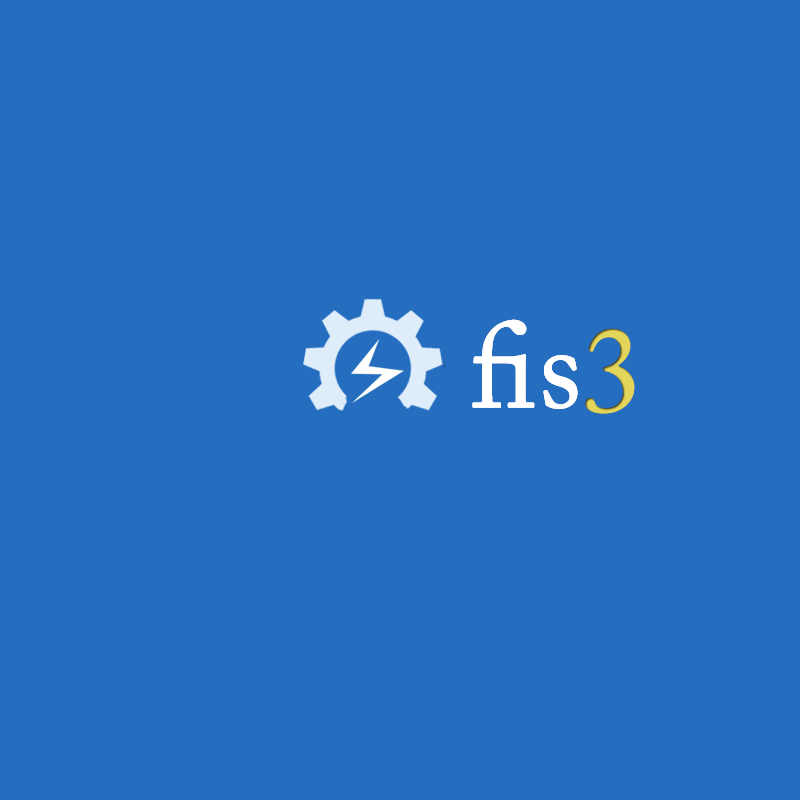
<style>
.page{position:relative;width:800px;height:800px;background:#256ebf}
.page>*{position:absolute;margin:0}
.t1{font:120px "ACaslonPro-Regular";color:#ffffff;font-weight:bold}
.t2{font:120px "ACaslonPro-Regular";color:#e3d45a;font-weight:bold}
</style>
<div class="page">
<p class="t1" style="left:472px;top:319px;width:106px;height:90px">fis</p>
<p class="t1" style="left:472px;top:319px;width:106px;height:90px">fis</p>
<p class="t2" style="left:585px;top:328px;width:50px;height:86px">3</p>
<p class="t2" style="left:585px;top:328px;width:50px;height:86px">3</p>
</div>
